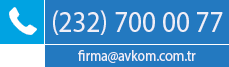
<style>
.page{position:relative;width:229px;height:67px;background:#2379c0}
.page>*{position:absolute;margin:0}
.t1{font:30px "MyriadPro-Regular";color:#efeff7;scale:0.91 1}
.t2{font:15px "MyriadPro-Regular";color:#efeff7;scale:0.91 1}
</style>
<div class="page">
<p class="t1" style="left:53px;top:10px;width:170px;height:25px">(232) 700 00 77</p>
<p class="t2" style="left:78px;top:50px;width:118px;height:13px">firma@avkom.com.tr</p>
</div>
